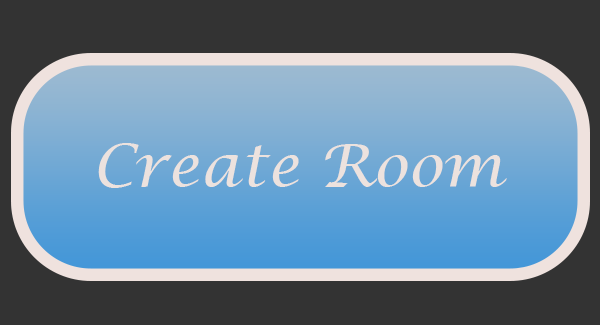
<style>
.page{position:relative;width:600px;height:325px;background:#333333}
.page>*{position:absolute;margin:0}
.t1{font:60px "LucidaCalligraphy-Italic";color:#ece2de}
</style>
<div class="page">
<p class="t1" style="left:98px;top:143px;width:409px;height:45px">Create Room</p>
</div>
